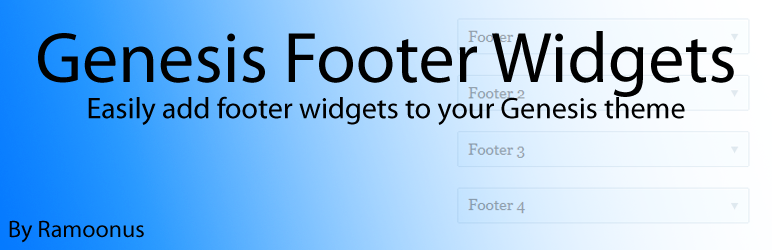
<style>
.page{position:relative;width:772px;height:250px}
.page>*{position:absolute;margin:0}
.t1{font:72px "MyriadPro-Regular";color:#000000}
.t2{font:30px "MyriadPro-Regular";color:#000000}
.t3{font:24px "MyriadPro-Regular";color:#000000}
</style>
<div class="page">
<p class="t1" style="left:38px;top:31px;width:696px;height:66px">Genesis Footer Widgets</p>
<p class="t2" style="left:88px;top:96px;width:597px;height:29px">Easily add footer widgets to your Genesis theme</p>
<p class="t3" style="left:9px;top:220px;width:135px;height:23px">By Ramoonus</p>
</div>
